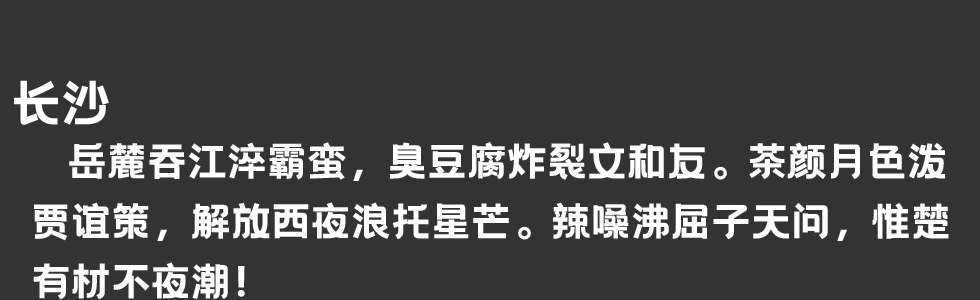
<style>
.page{position:relative;width:980px;height:300px;background:#333333}
.page>*{position:absolute;margin:0}
.t1{font:50px "HelloFont-WenYiHei";color:#ffffff}
.t2{font:40px/60px "HelloFont-WenYiHei";color:#ffffff}
</style>
<div class="page">
<p class="t1" style="left:14px;top:80px;width:95px;height:45px">长沙</p>
<p class="t2" style="left:33px;top:142px;width:916px;height:158px">岳麓吞江淬霸蛮，臭豆腐炸裂文和友。茶颜月色泼<br>贾谊策，解放西夜浪托星芒。辣嗓沸屈子天问，惟楚<br>有材不夜潮！</p>
</div>
